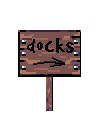
<style>
.page{position:relative;width:96px;height:128px;background:#ffffff}
.page>*{position:absolute;margin:0}
.t1{font:24px "GoodDogPlain";color:#000000}
</style>
<div class="page">
<p class="t1" style="left:27px;top:38px;width:47px;height:15px">docks</p>
</div>
